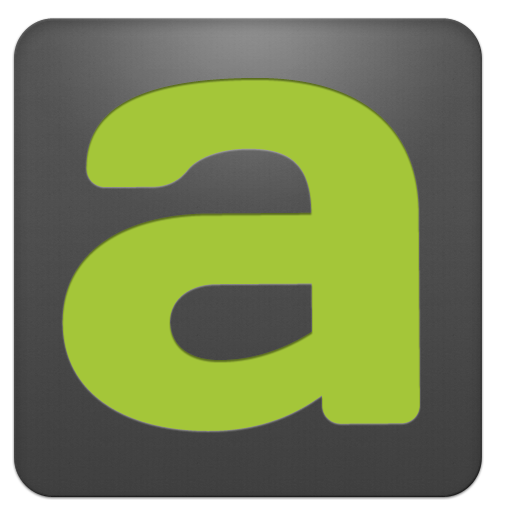
<style>
.page{position:relative;width:512px;height:512px;background:#a4c639}
.page>*{position:absolute;margin:0}
.t1{font:635px "Days";color:#a4c639}
</style>
<div class="page">
<p class="t1" style="left:62px;top:78px;width:358px;height:353px">а</p>
</div>
